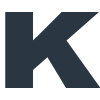
<style>
.page{position:relative;width:100px;height:100px;background:#ffffff}
.page>*{position:absolute;margin:0}
.t1{font:106.2px "Arial-Black";color:#2b3643;scale:1.18 1}
</style>
<div class="page">
<p class="t1" style="left:5px;top:12px;width:96px;height:76px">K</p>
</div>
